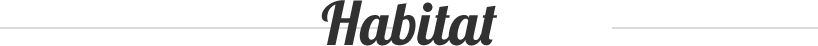
<style>
.page{position:relative;width:818px;height:46px;background:#ffffff}
.page>*{position:absolute;margin:0}
.t1{font:59.6px "Lobster1.4";color:#313131}
</style>
<div class="page">
<p class="t1" style="left:321px;top:0px;width:176px;height:46px">Habitat</p>
</div>
